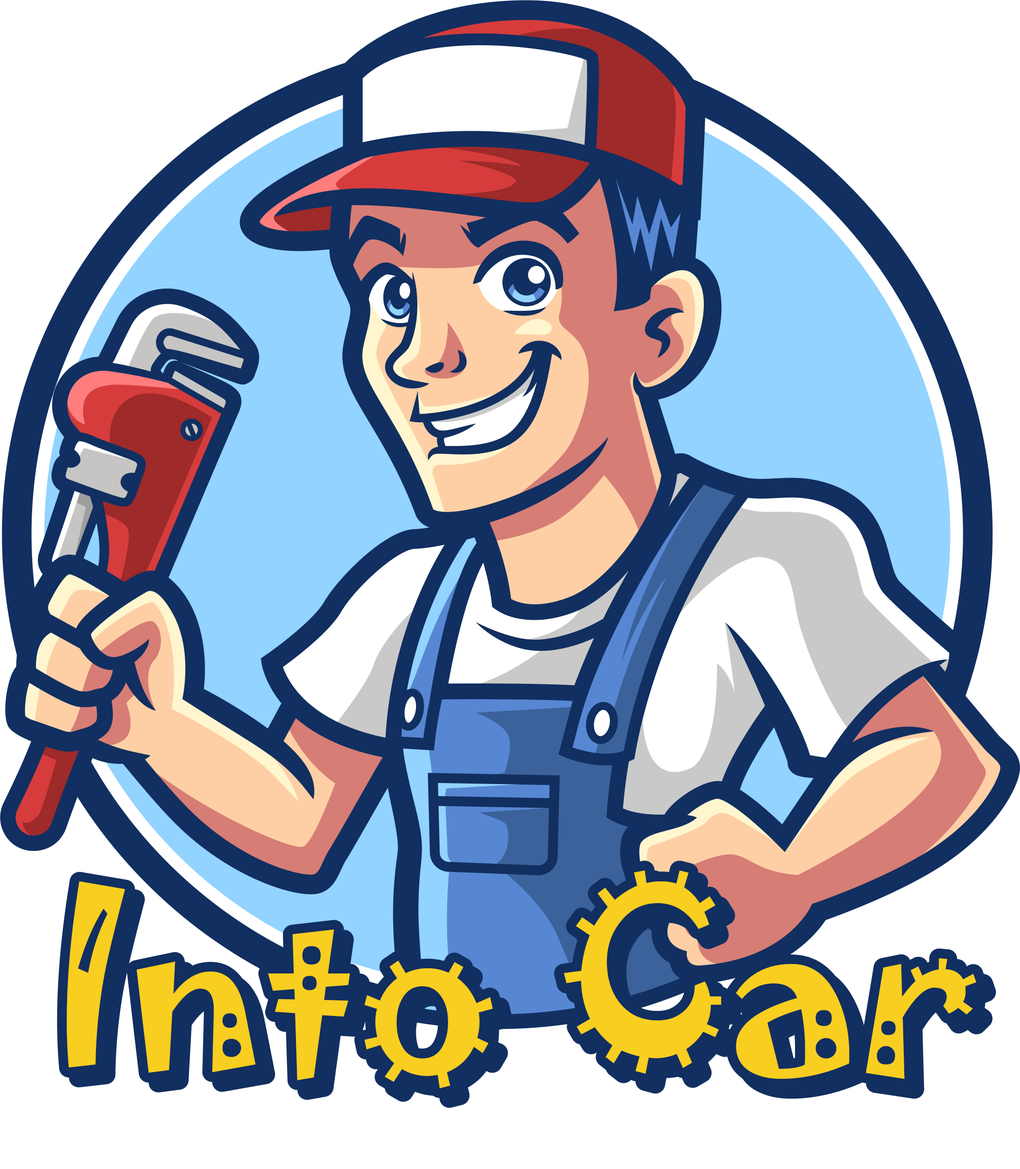
<style>
.page{position:relative;width:1020px;height:1169px;background:#ffffff}
.page>*{position:absolute;margin:0}
.t1{font:229.5px "Jokerman-Regular";color:#f8ce20}
.t2{font:229.5px "Jokerman-Regular";color:#f9cf21}
</style>
<div class="page">
<p class="t1" style="left:67px;top:870px;width:909px;height:219px">Into Car</p>
<p class="t2" style="left:67px;top:870px;width:909px;height:219px">Into Car</p>
</div>
